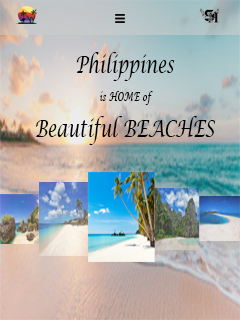
<style>
.page{position:relative;width:240px;height:320px}
.page>*{position:absolute;margin:0}
.t1{font:24.5px "LucidaCalligraphy-Italic";color:#000000;scale:0.68 1}
.t2{font:12.2px "LucidaCalligraphy-Italic";color:#000000;scale:0.68 1}
</style>
<div class="page">
<p class="t1" style="left:76px;top:52px;width:99px;height:29px">Philippines</p>
<p class="t2" style="left:100px;top:91px;width:53px;height:14px">is HOME of</p>
<p class="t1" style="left:35px;top:116px;width:180px;height:29px">Beautiful BEACHES</p>
</div>
